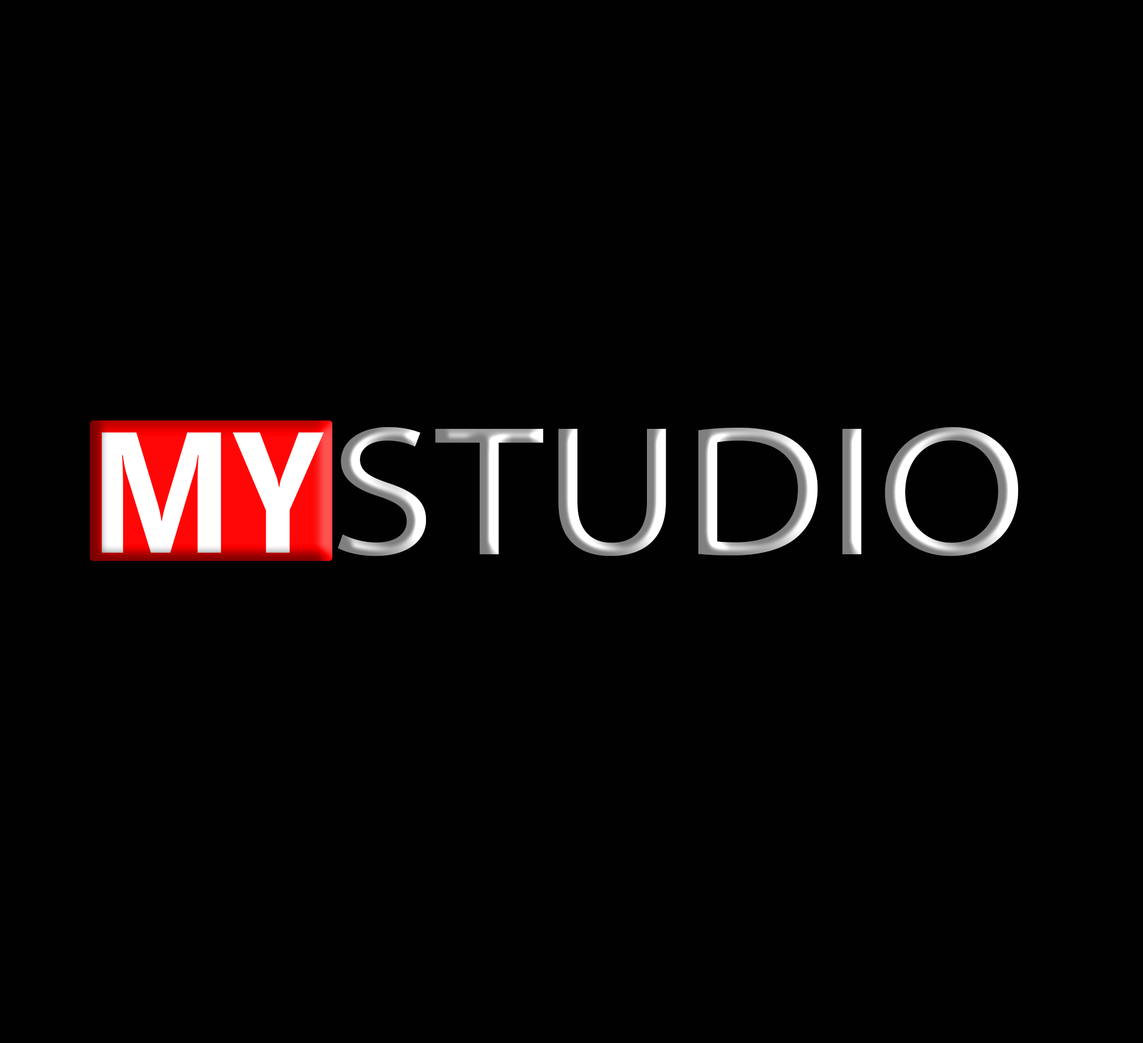
<style>
.page{position:relative;width:1143px;height:1043px;background:#010101}
.page>*{position:absolute;margin:0}
.t1{font:186px "MyriadPro-Regular";scale:1.16 1}
</style>
<div class="page">
<p class="t1" style="left:338px;top:427px;width:680px;height:130px">STUDIO</p>
</div>
